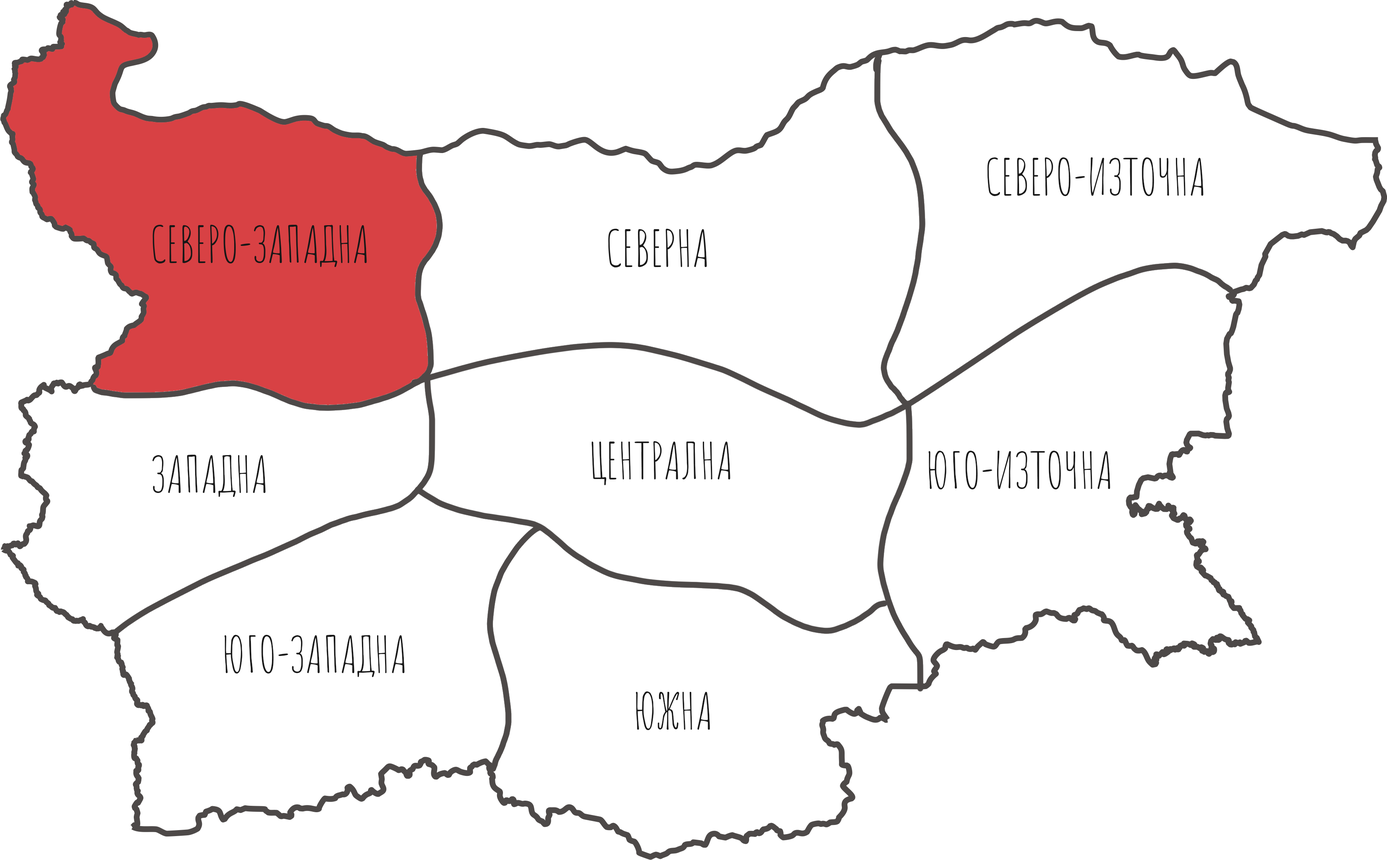
<style>
.page{position:relative;width:1387px;height:860px;background:#ffffff}
.page>*{position:absolute;margin:0}
.t1{font:49.8px "AmaticSC-Regular";color:#171717}
</style>
<div class="page">
<p class="t1" style="left:987px;top:157px;width:217px;height:39px">СЕВЕРО-ИЗТОЧНА</p>
<p class="t1" style="left:591px;top:441px;width:139px;height:44px">ЦЕНТРАЛНА</p>
<p class="t1" style="left:152px;top:454px;width:114px;height:43px">ЗАПАДНА</p>
<p class="t1" style="left:928px;top:450px;width:182px;height:39px">ЮГО-ИЗТОЧНА</p>
<p class="t1" style="left:224px;top:634px;width:181px;height:43px">ЮГО-ЗАПАДНА</p>
<p class="t1" style="left:636px;top:691px;width:74px;height:39px">ЮЖНА</p>
</div>
